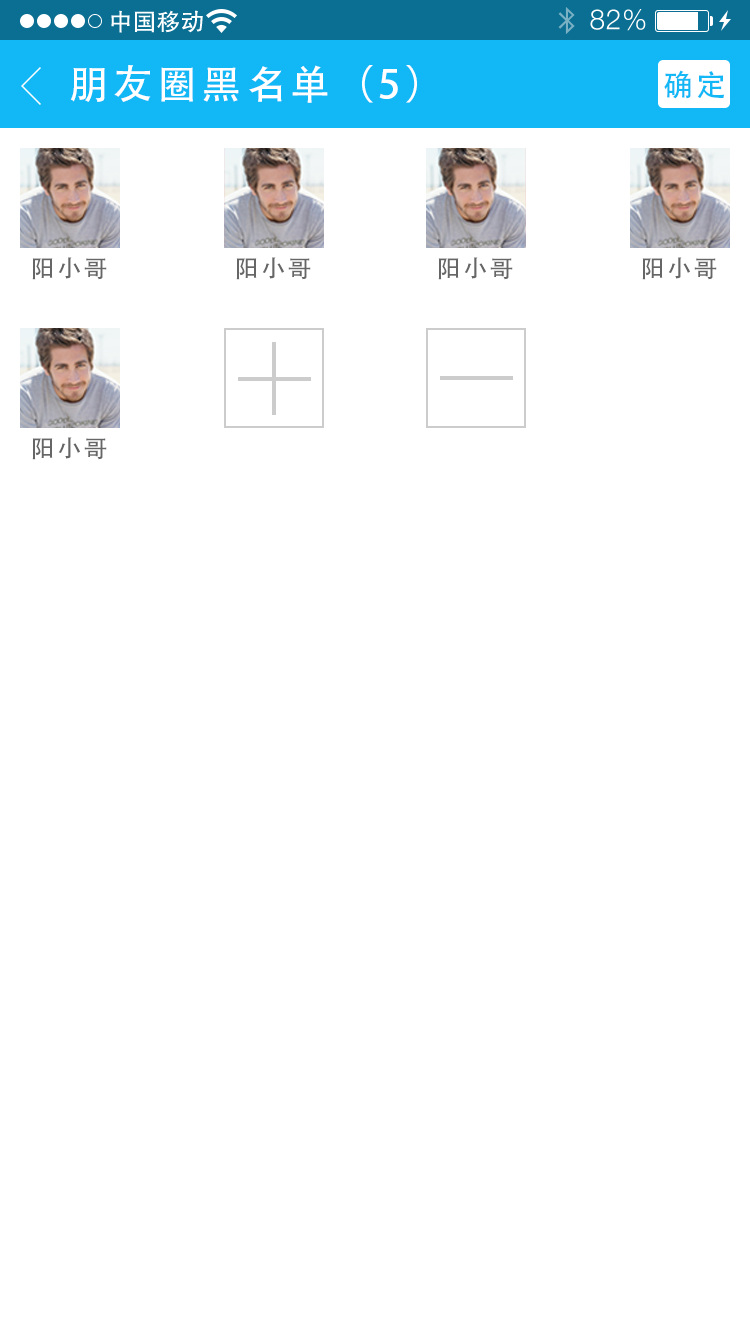
<style>
.page{position:relative;width:750px;height:1334px;background:#ffffff}
.page>*{position:absolute;margin:0}
.t1{font:40px "AdobeHeitiStd-Regular";letter-spacing:0.104em;color:#ffffff}
.t2{font:30px "AdobeHeitiStd-Regular";letter-spacing:0.104em;color:#12b8f6}
.t3{font:24px "AdobeHeitiStd-Regular";letter-spacing:0.104em;color:#666666}
</style>
<div class="page">
<p class="t1" style="left:70px;top:65px;width:347px;height:38px">朋友圈黑名单（5）</p>
<p class="t2" style="left:664px;top:70px;width:61px;height:29px">确定</p>
<p class="t3" style="left:32px;top:257px;width:75px;height:23px">阳小哥</p>
<p class="t3" style="left:236px;top:257px;width:75px;height:23px">阳小哥</p>
<p class="t3" style="left:438px;top:257px;width:75px;height:23px">阳小哥</p>
<p class="t3" style="left:642px;top:257px;width:75px;height:23px">阳小哥</p>
<p class="t3" style="left:32px;top:437px;width:75px;height:23px">阳小哥</p>
</div>
